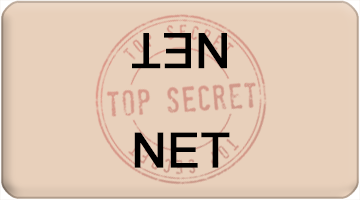
<style>
.page{position:relative;width:360px;height:200px;background:#e8d0bb}
.page>*{position:absolute;margin:0}
.t1{font:48px "ArialMT";color:#000000;font-weight:bold}
</style>
<div class="page">
<p class="t1" style="left:132px;top:33px;width:95px;height:36px;rotate:180deg">NET</p>
<p class="t1" style="left:134px;top:132px;width:96px;height:36px">NET</p>
</div>
